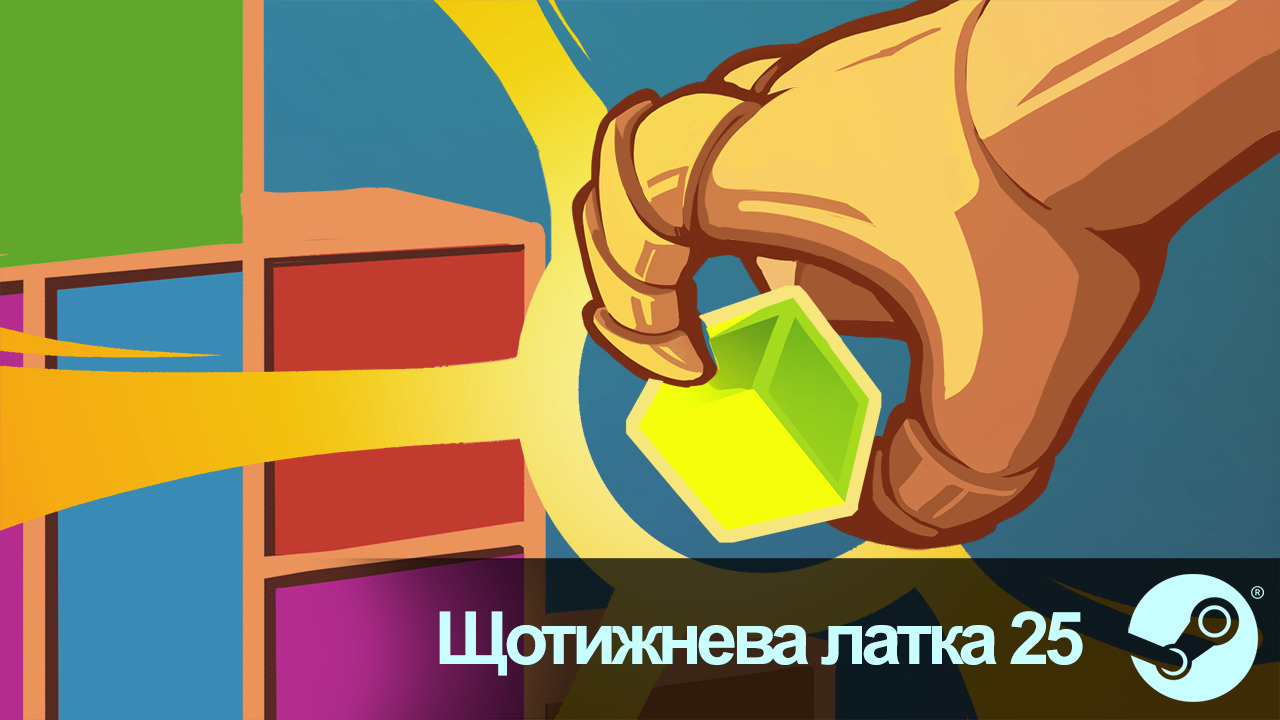
<style>
.page{position:relative;width:1280px;height:720px}
.page>*{position:absolute;margin:0}
.t1{font:73.3px "Arial-BoldMT";letter-spacing:-0.075em;color:#c8feff}
</style>
<div class="page">
<p class="t1" style="left:439px;top:611px;width:644px;height:65px">Щотижнева латка 25</p>
</div>
